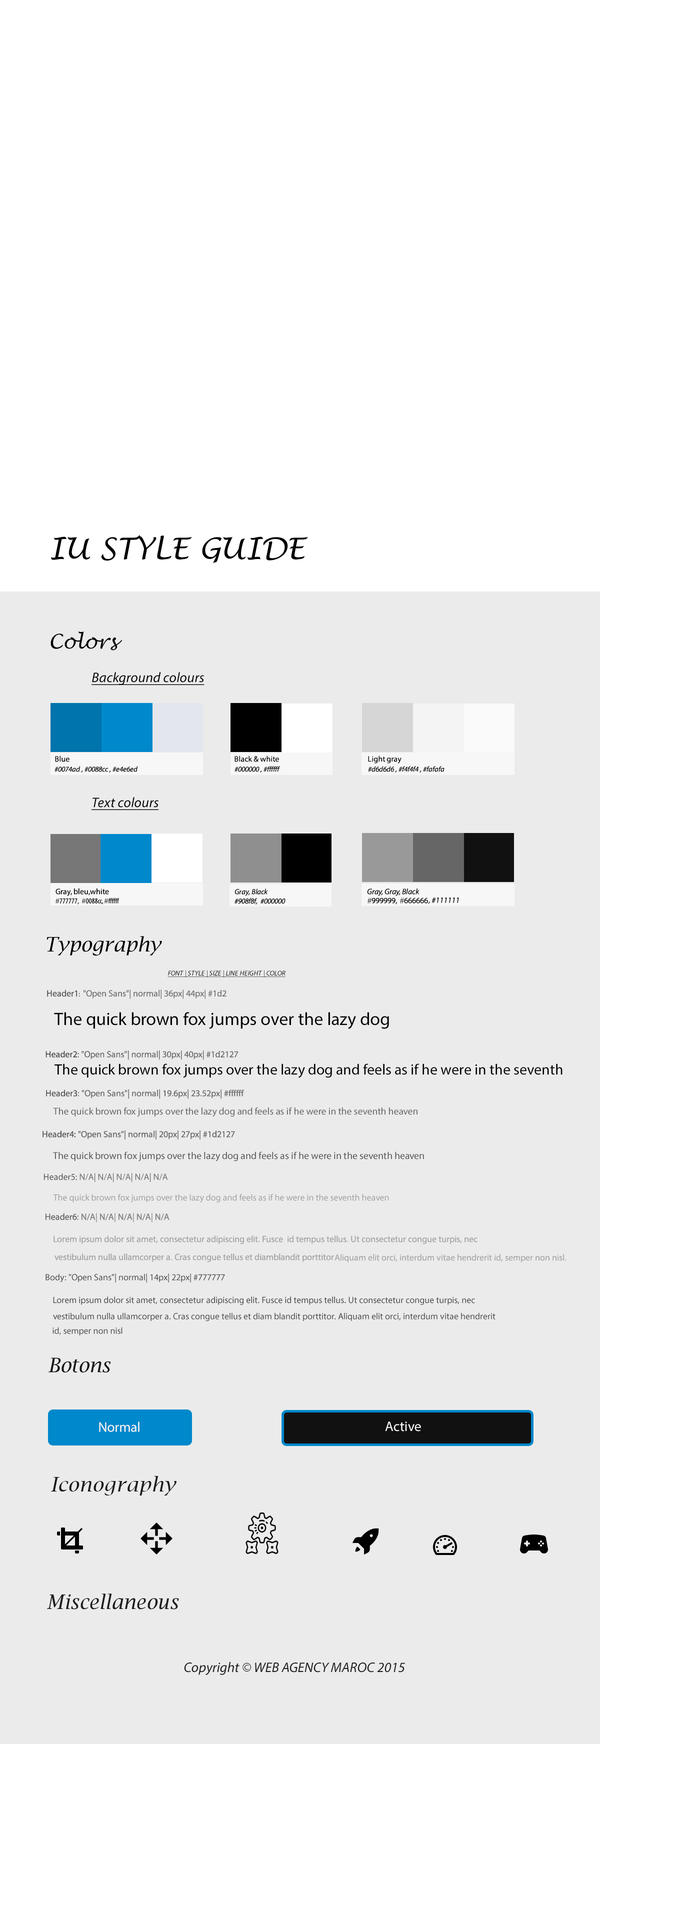
<style>
.page{position:relative;width:683px;height:1920px;background:#ffffff}
.page>*{position:absolute;margin:0}
.t1{font:29.5px "LucidaHandwriting-Italic";color:#000000}
.t2{font:20px "LucidaHandwriting-Italic";color:#000000}
.t3{font:14px "MyriadPro-It";color:#000000;text-decoration:underline}
.t4{font:8px "MyriadPro-Regular";color:#000000}
.t5{font:7.5px "MyriadPro-It";color:#000000}
.t6{font:8px "MyriadConceptRoman-Regular";color:#000000}
.t7{font:8px "MyriadPro-It";color:#000000}
.t8{font:7.5px "MyriadConceptRoman-Condensed";color:#000000}
.t9{font:7.5px "TimesNewRomanPSMT";color:#000000}
.t10{font:8px "TimesNewRomanPSMT";color:#000000}
.t11{font:20px "LucidaBright-Italic";color:#000000}
.t12{font:7px "MyriadPro-It";color:#000000;text-decoration:underline}
.t13{font:9px "MyriadPro-Regular";color:#747474}
.t14{font:9px "MyriadPro-Regular";color:#525252}
.t15{font:7px "MyriadPro-Regular";color:#000000}
.t16{font:18px "MyriadPro-Regular";color:#000000}
.t17{font:9px "MyriadPro-Regular";color:#6a6a6a}
.t18{font:9px "MyriadPro-Regular";color:#474747}
.t19{font:15px "MyriadPro-Regular";color:#000000}
.t20{font:9px "MyriadPro-Regular";color:#696969}
.t21{font:9px "MyriadPro-Regular";color:#4f4f4f}
.t22{font:9.8px "MyriadPro-Regular";color:#646464}
.t23{font:9px "MyriadPro-Regular";color:#656565}
.t24{font:9px "MyriadPro-Regular";color:#545454}
.t25{font:9px "MyriadPro-Regular";color:#000000}
.t26{font:10px "MyriadPro-Regular";color:#515151}
.t27{font:9px "MyriadPro-Regular";color:#6b6b6b}
.t28{font:9px "MyriadPro-Regular";color:#484848}
.t29{font:9px "MyriadPro-Regular";color:#4b4b4b}
.t30{font:9px "MyriadPro-Regular";color:#9f9f9f}
.t31{font:9px "MyriadPro-Regular";color:#7c7c7c}
.t32{font:9px "MyriadPro-Regular";color:#5f5f5f}
.t33{font:9px "MyriadPro-Regular";color:#a4a4a4}
.t34{font:9px "MyriadPro-Regular";color:#a2a2a2}
.t35{font:9px "MyriadPro-Regular";color:#a9a9a9}
.t36{font:9px "MyriadPro-Regular";color:#434343}
.t37{font:20px "LucidaBright-Italic";color:#151515}
.t38{font:14px "MyriadPro-Regular";color:#f3f3f3}
.t39{font:20px "LucidaBright-Italic";letter-spacing:0.025em;color:#191919}
.t40{font:20px "LucidaBright-Italic";color:#1c1c1c}
.t41{font:14px "MyriadPro-It";color:#1c1c1c}
</style>
<div class="page">
<p class="t1" style="left:51px;top:534px;width:257px;height:29px">IU STYLE GUIDE</p>
<p class="t2" style="left:50px;top:631px;width:72px;height:19px">Colors</p>
<p class="t3" style="left:92px;top:672px;width:112px;height:13px">Background colours</p>
<p class="t4" style="left:55px;top:756px;width:15px;height:6px">Blue</p>
<p class="t4" style="left:234px;top:756px;width:45px;height:6px">Black &amp; white</p>
<p class="t4" style="left:368px;top:756px;width:34px;height:8px">Light gray</p>
<p class="t5" style="left:54px;top:766px;width:84px;height:7px">#0074ad , #0088cc , #e4e6ed</p>
<p class="t5" style="left:234px;top:766px;width:46px;height:7px">#000000 , #ffffff</p>
<p class="t5" style="left:368px;top:766px;width:76px;height:7px">#d6d6d6 , #f4f4f4 , #fafafa</p>
<p class="t3" style="left:92px;top:797px;width:67px;height:13px">Text colours</p>
<p class="t6" style="left:56px;top:888px;width:53px;height:8px">Gray, bleu,white</p>
<p class="t5" style="left:234px;top:888px;width:34px;height:8px">Gray, Black</p>
<p class="t7" style="left:367px;top:888px;width:53px;height:8px">Gray, Gray, Black</p>
<p class="t8" style="left:56px;top:898px;width:23px;height:6px"><span class="t9">#</span>777777,</p>
<p class="t8" style="left:82px;top:898px;width:38px;height:6px"><span class="t9">#</span>0088cc, <span class="t9">#</span>ffffff</p>
<p class="t5" style="left:234px;top:898px;width:52px;height:6px">#908f8f,  #000000</p>
<p class="t6" style="left:368px;top:898px;width:60px;height:6px"><span class="t10">#</span>999999,  <span class="t10">#</span>666666</p>
<p class="t7" style="left:428px;top:898px;width:31px;height:6px">, #111111</p>
<p class="t11" style="left:46px;top:936px;width:116px;height:20px">Typography</p>
<p class="t12" style="left:168px;top:970px;width:118px;height:8px">FONT | STYLE | SIZE | LINE HEIGHT | COLOR</p>
<p class="t13" style="left:47px;top:990px;width:179px;height:9px"><span class="t14">Header1</span><span class="t15">:  </span>"Open Sans"| normal| 36px| 44px| #1d2</p>
<p class="t16" style="left:54px;top:1012px;width:335px;height:17px">The quick brown fox jumps over the lazy dog</p>
<p class="t17" style="left:46px;top:1050px;width:192px;height:10px"><span class="t18">Header2:</span> "Open Sans"| normal| 30px| 40px| #1d2127</p>
<p class="t19" style="left:54px;top:1064px;width:508px;height:14px">The quick brown fox jumps over the lazy dog and feels as if he were in the seventh</p>
<p class="t20" style="left:46px;top:1089px;width:198px;height:10px"><span class="t21">Header3</span><span class="t14">: </span>"Open Sans"| normal| 19.6px| 23.52px| #ffffff</p>
<p class="t22" style="left:53px;top:1107px;width:365px;height:10px">The quick brown fox jumps over the lazy dog and feels as if he were in the seventh heaven</p>
<p class="t23" style="left:42px;top:1130px;width:193px;height:10px"><span class="t24">Header4</span><span class="t25">: </span>"Open Sans"| normal| 20px| 27px| #1d2127</p>
<p class="t26" style="left:53px;top:1152px;width:371px;height:10px">The quick brown fox jumps over the lazy dog and feels as if he were in the seventh heaven</p>
<p class="t27" style="left:44px;top:1173px;width:124px;height:9px"><span class="t28">Header5</span><span class="t29">: </span>N/A| N/A| N/A| N/A| N/A</p>
<p class="t30" style="left:53px;top:1194px;width:336px;height:8px">The quick brown fox jumps over the lazy dog and feels as if he were in the seventh heaven</p>
<p class="t31" style="left:46px;top:1213px;width:124px;height:9px"><span class="t32">Header6: </span>N/A| N/A| N/A| N/A| N/A</p>
<p class="t33" style="left:54px;top:1236px;width:424px;height:8px">Lorem ipsum dolor sit amet, consectetur adipiscing elit. Fusce  id tempus tellus. Ut consectetur congue turpis, nec</p>
<p class="t34" style="left:54px;top:1254px;width:280px;height:8px">vestibulum nulla ullamcorper a. Cras congue tellus et diamblandit porttitor</p>
<p class="t35" style="left:334px;top:1254px;width:232px;height:8px">Aliquam elit orci, interdum vitae hendrerit id, semper non nisl.</p>
<p class="t36" style="left:46px;top:1274px;width:179px;height:8px">Body: "Open Sans"| normal| 14px| 22px| #777777</p>
<p class="t36" style="left:53px;top:1296px;width:422px;height:9px">Lorem ipsum dolor sit amet, consectetur adipiscing elit. Fusce id tempus tellus. Ut consectetur congue turpis, nec</p>
<p class="t36" style="left:53px;top:1312px;width:443px;height:10px">vestibulum nulla ullamcorper a. Cras congue tellus et diam blandit porttitor. Aliquam elit orci, interdum vitae hendrerit</p>
<p class="t36" style="left:52px;top:1327px;width:70px;height:9px">id, semper non nisl</p>
<p class="t37" style="left:48px;top:1358px;width:63px;height:14px">Botons</p>
<p class="t38" style="left:99px;top:1422px;width:41px;height:10px">Normal</p>
<p class="t38" style="left:385px;top:1422px;width:36px;height:10px">Active</p>
<p class="t39" style="left:50px;top:1476px;width:126px;height:20px">Iconography</p>
<p class="t40" style="left:47px;top:1594px;width:132px;height:16px">Miscellaneous</p>
<p class="t41" style="left:184px;top:1662px;width:221px;height:14px">Copyright © WEB AGENCY MAROC 2015</p>
</div>
